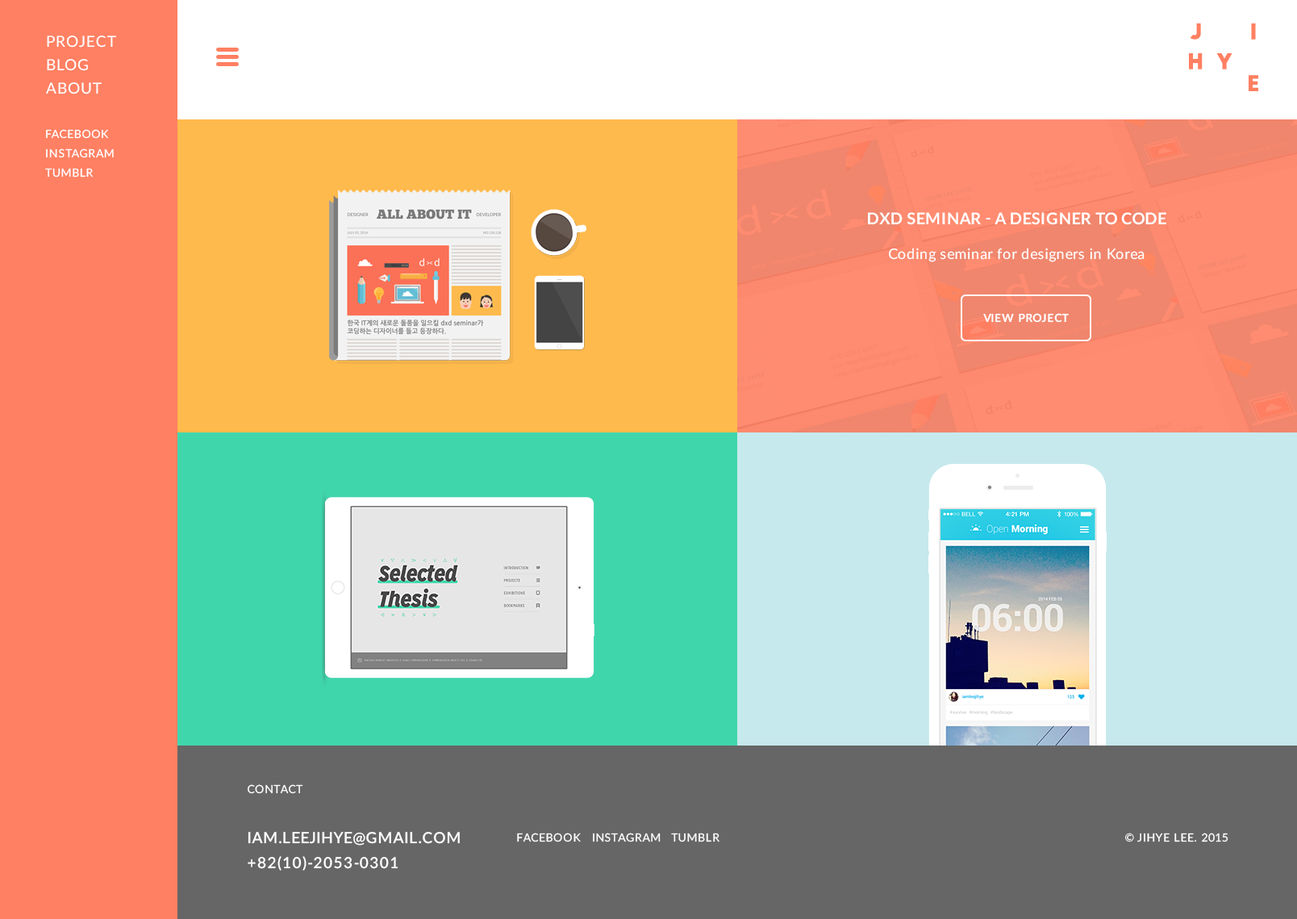
<style>
.page{position:relative;width:1297px;height:919px}
.page>*{position:absolute;margin:0}
.t1{font:15.3px "Lato-Regular";letter-spacing:0.05em;color:#fffefe}
.t2{font:15.3px/23.4px "Lato-Regular";letter-spacing:0.05em;color:#ffffff}
.t3{font:11.3px/19.4px "Lato-Regular";letter-spacing:0.05em;color:#ffffff}
.t4{font:16.1px "Lato-Bold";letter-spacing:0.025em;color:#ffffff;text-transform:uppercase}
.t5{font:14.5px "Lato-Regular";letter-spacing:0.025em;color:#ffffff}
.t6{font:11.3px "Lato-Bold";letter-spacing:0.025em;color:#ffffff;text-transform:uppercase}
.t7{font:15.3px/25px "Lato-Semibold";letter-spacing:0.05em;color:#ffffff}
.t8{font:11.3px/25px "Lato-Regular";letter-spacing:0.05em;color:#ffffff}
.t9{font:11.3px "Lato-Regular";letter-spacing:0.05em;color:#ffffff}
</style>
<div class="page">
<p class="t1" style="left:47px;top:36px;width:69px;height:12px">PROJECT</p>
<p class="t2" style="left:46px;top:59px;width:56px;height:35px">BLOG<br>ABOUT</p>
<p class="t3" style="left:45px;top:129px;width:69px;height:49px">FACEBOOK<br>INSTAGRAM<br>TUMBLR</p>
<p class="t4" style="left:868px;top:212px;width:299px;height:13px">dxd seminar - A Designer to Code</p>
<p class="t5" style="left:888px;top:248px;width:257px;height:14px">Coding seminar for designers in Korea</p>
<p class="t6" style="left:984px;top:313px;width:85px;height:10px">View Project</p>
<p class="t7" style="left:248px;top:784px;width:212px;height:87px"><span class="t8">CONTACT<br><br></span>IAM.LEEJIHYE@GMAIL.COM<br>+82(10)-2053-0301</p>
<p class="t9" style="left:517px;top:833px;width:203px;height:9px">FACEBOOK   INSTAGRAM   TUMBLR</p>
<p class="t9" style="left:1126px;top:833px;width:103px;height:9px">© JIHYE LEE. 2015</p>
</div>
